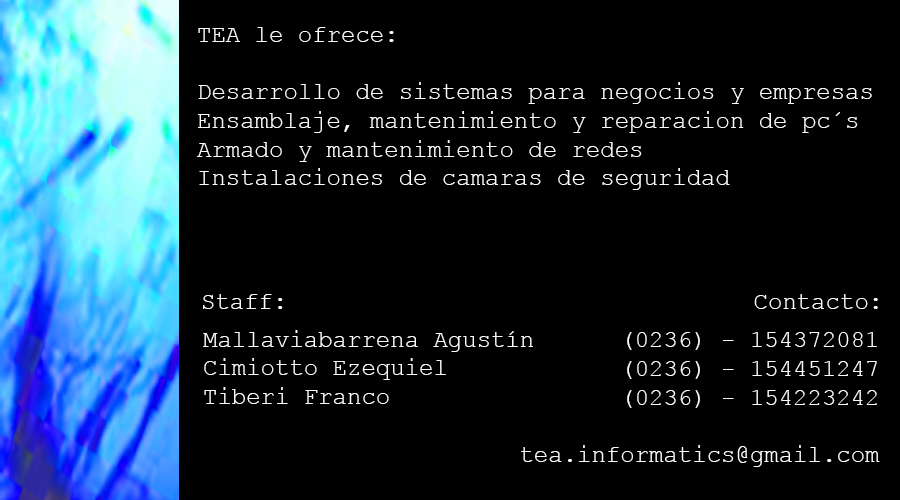
<style>
.page{position:relative;width:900px;height:500px;background:#000000}
.page>*{position:absolute;margin:0}
.t1{font:24px "CourierNewPSMT";color:#fdfafa}
</style>
<div class="page">
<p class="t1" style="left:197px;top:27px;width:675px;height:163px">TEA le ofrece:<br><br>Desarrollo de sistemas para negocios y empresas<br>Ensamblaje, mantenimiento y reparacion de pc´s<br>Armado y mantenimiento de redes<br>Instalaciones de camaras de seguridad</p>
<p class="t1" style="left:203px;top:294px;width:80px;height:15px">Staff:</p>
<p class="t1" style="left:754px;top:294px;width:124px;height:15px">Contacto:</p>
<p class="t1" style="left:203px;top:330px;width:330px;height:74px">Mallaviabarrena Agustín<br>Cimiotto Ezequiel<br>Tiberi Franco</p>
<p class="t1" style="left:521px;top:332px;width:359px;height:135px;text-align:right">(0236) - 154372081<br>(0236) - 154451247<br>(0236) - 154223242<br><br>tea.informatics@gmail.com</p>
</div>
